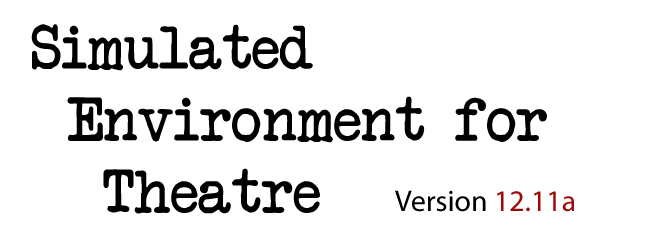
<style>
.page{position:relative;width:657px;height:250px;background:#ffffff}
.page>*{position:absolute;margin:0}
.t1{font:60px "AnotherTypewriter";color:#000000}
.t2{font:30px "MyriadPro-Regular";color:#000000}
.t3{font:30px "MyriadPro-Regular";color:#a00808}
</style>
<div class="page">
<p class="t1" style="left:31px;top:24px;width:516px;height:190px">Simulated <br> Environment for <br>  Theatre</p>
<p class="t2" style="left:395px;top:190px;width:180px;height:22px">Version <span class="t3">12.11a</span></p>
</div>
